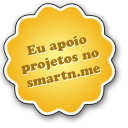
<style>
.page{position:relative;width:128px;height:128px;background:#ffffff}
.page>*{position:absolute;margin:0}
.t1{font:13px "CooperBlackStd"}
.t2{font:13px "CooperBlackStd";color:#a3730f}
</style>
<div class="page">
<p class="t1" style="left:21px;top:36px;width:80px;height:52px;text-align:center;rotate:-12deg">Eu apoio<br>projetos no<br>smartn.me</p>
<p class="t2" style="left:21px;top:36px;width:79px;height:52px;text-align:center;rotate:-12deg">Eu apoio<br>projetos no<br>smartn.me</p>
</div>
